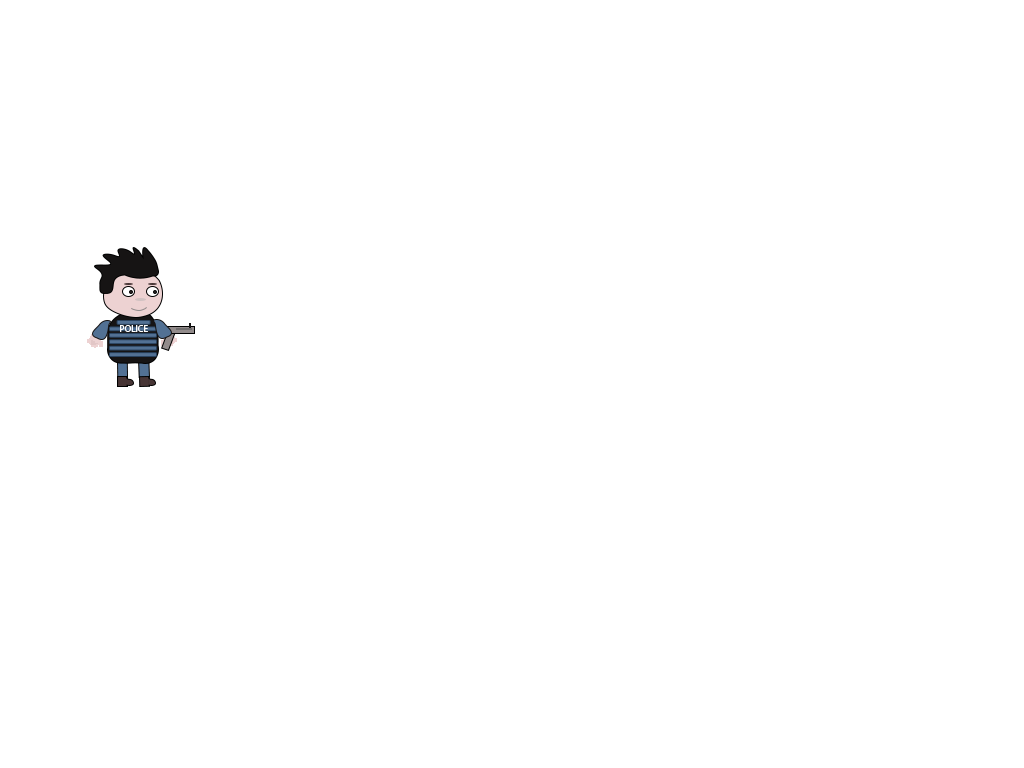
<style>
.page{position:relative;width:1024px;height:768px;background:#ffffff}
.page>*{position:absolute;margin:0}
.t1{font:9.6px "MyriadPro-Regular";color:#ffffff}
</style>
<div class="page">
<p class="t1" style="left:120px;top:325px;width:28px;height:7px">POLICE</p>
</div>
